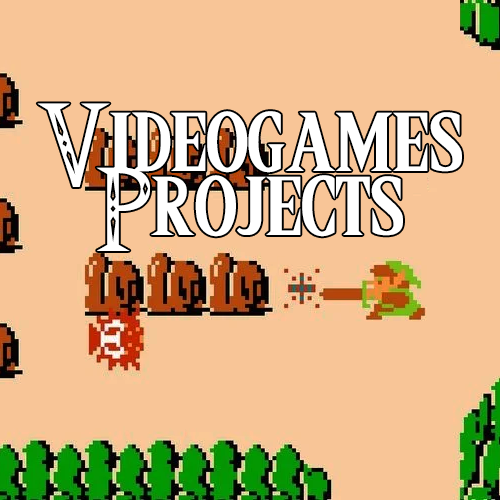
<style>
.page{position:relative;width:500px;height:500px;background:#f8c597}
.page>*{position:absolute;margin:0}
.t1{font:96px/16px "Triforce";color:#ffffff}
</style>
<div class="page">
<p class="t1" style="left:37px;top:103px;width:425px;height:148px;text-align:center">Videogames<br><br><br><br>Projects</p>
</div>
